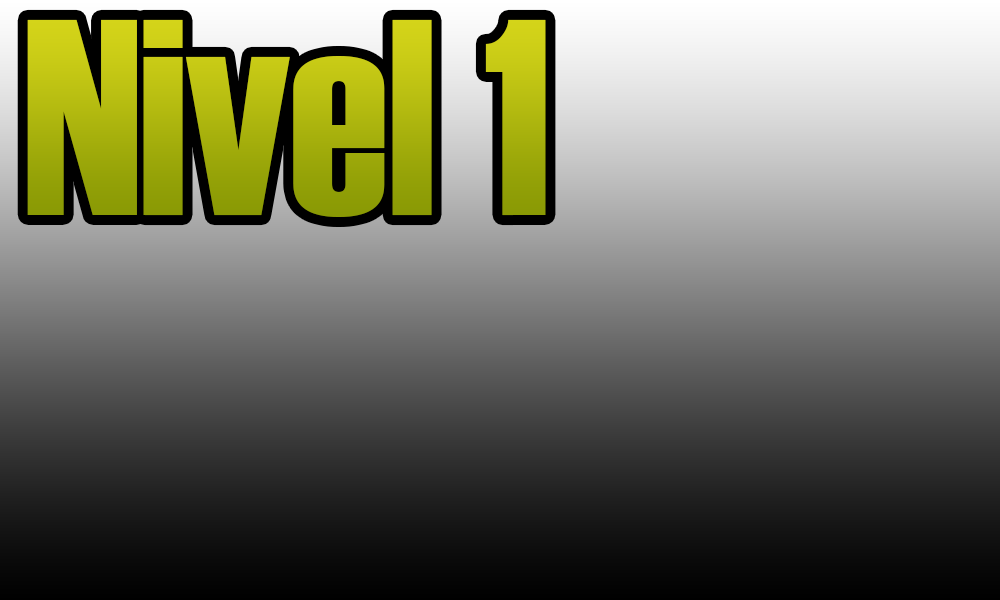
<style>
.page{position:relative;width:1000px;height:600px}
.page>*{position:absolute;margin:0}
.t1{font:279px "Haettenschweiler";letter-spacing:-0.005em}
</style>
<div class="page">
<p class="t1" style="left:27px;top:19px;width:519px;height:198px">Nivel 1</p>
</div>
